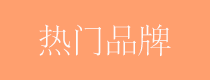
<style>
.page{position:relative;width:210px;height:80px;background:#ff9f6e}
.page>*{position:absolute;margin:0}
.t1{font:33.3px "FZSYJW--GB1-0";color:#fcfcfc}
</style>
<div class="page">
<p class="t1" style="left:39px;top:24px;width:132px;height:33px">热门品牌</p>
</div>
